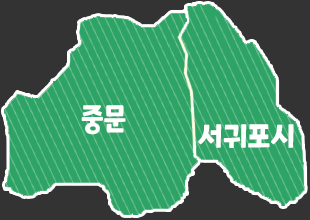
<style>
.page{position:relative;width:310px;height:220px;background:#2da365}
.page>*{position:absolute;margin:0}
.t1{font:30.5px "ONEMobilePOPRegular";color:#ffffff;scale:0.93 1}
</style>
<div class="page">
<p class="t1" style="left:81px;top:105px;width:45px;height:30px">중문</p>
<p class="t1" style="left:198px;top:124px;width:96px;height:24px">서귀포시</p>
</div>
